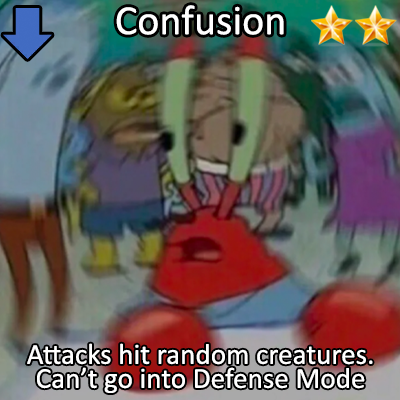
<style>
.page{position:relative;width:400px;height:400px}
.page>*{position:absolute;margin:0}
.t1{font:72px "Calibri";color:#ffffff}
.t2{font:50px/24px "Calibri";color:#ffffff}
</style>
<div class="page">
<p class="t1" style="left:116px;top:5px;width:168px;height:30px">Confusion</p>
<p class="t2" style="left:27px;top:343px;width:346px;height:50px;text-align:center">Attacks hit random creatures.<br>Can’t go into Defense Mode</p>
</div>
